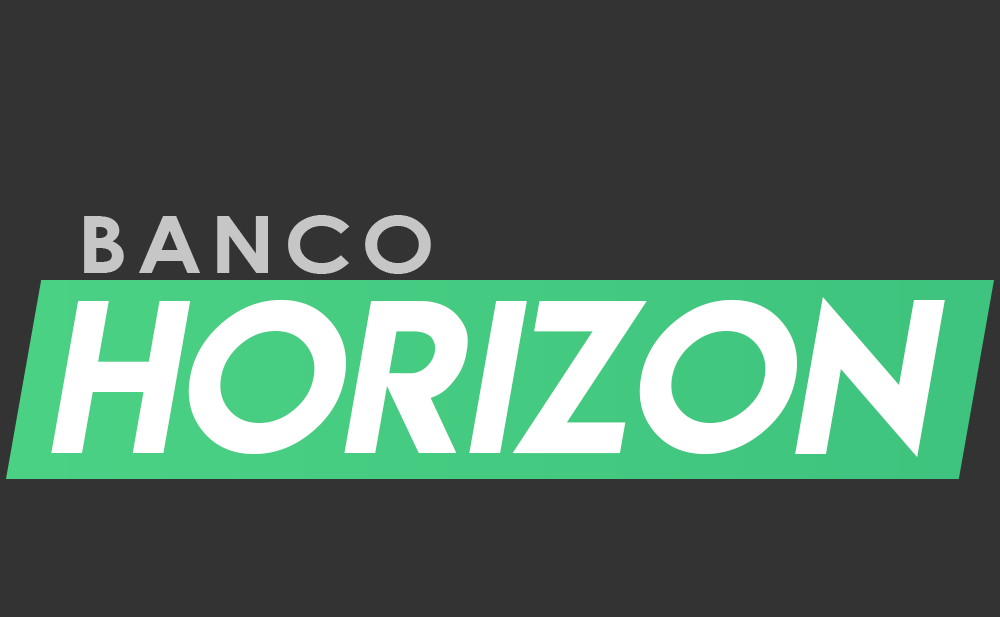
<style>
.page{position:relative;width:1000px;height:617px;background:#333333}
.page>*{position:absolute;margin:0}
.t1{font:79.8px "CenturyGothic-Bold";letter-spacing:0.1em;color:#c6c6c6;scale:1.1 1}
.t2{font:193.6px "LemonMilk";color:#ffffff;font-style:italic}
</style>
<div class="page">
<p class="t1" style="left:84px;top:215px;width:347px;height:59px">BANCO</p>
<p class="t2" style="left:51px;top:297px;width:894px;height:160px">HORIZON</p>
</div>
